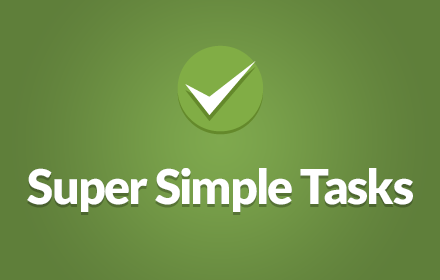
<style>
.page{position:relative;width:440px;height:280px}
.page>*{position:absolute;margin:0}
.t1{font:48px "Lato-Black";letter-spacing:-0.025em;color:#ffffff}
</style>
<div class="page">
<p class="t1" style="left:27px;top:168px;width:386px;height:44px">Super Simple Tasks</p>
</div>
